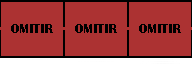
<style>
.page{position:relative;width:192px;height:64px;background:#ac3232}
.page>*{position:absolute;margin:0}
.t1{font:12.5px "BritannicBold";color:#000000}
</style>
<div class="page">
<p class="t1" style="left:11px;top:24px;width:42px;height:9px">OMITIR</p>
<p class="t1" style="left:75px;top:24px;width:42px;height:9px">OMITIR</p>
<p class="t1" style="left:139px;top:24px;width:42px;height:9px">OMITIR</p>
</div>
